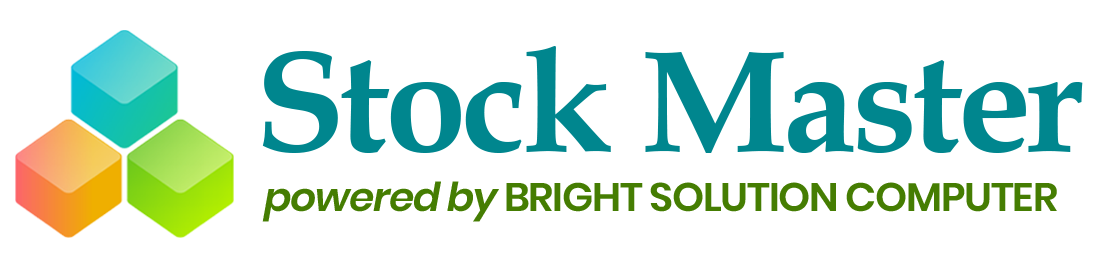
<style>
.page{position:relative;width:1100px;height:268px;background:#ffffff}
.page>*{position:absolute;margin:0}
.t1{font:145.3px "BookAntiqua-Bold";letter-spacing:-0.03em;color:#00868e}
.t2{font:39.7px "Poppins-SemiBold";letter-spacing:-0.03em;color:#457d02}
.t3{font:39.7px "Poppins-SemiBoldItalic";letter-spacing:-0.03em;color:#457d02}
</style>
<div class="page">
<p class="t1" style="left:262px;top:46px;width:821px;height:107px">Stock Master</p>
<p class="t2" style="left:262px;top:181px;width:795px;height:41px"><span class="t3">powered by</span> BRIGHT SOLUTION COMPUTER</p>
</div>
